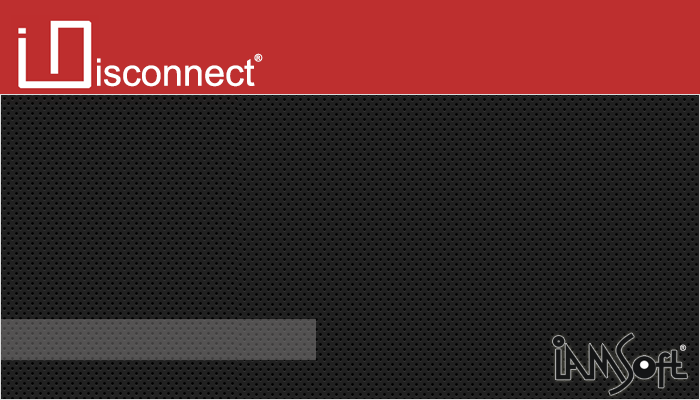
<style>
.page{position:relative;width:700px;height:400px;background:#202020}
.page>*{position:absolute;margin:0}
.t1{font:18px "ArialMT";color:#ffffff}
.t2{font:65px "ArialMT";color:#ffffff}
.t3{font:14px "ArialMT"}
</style>
<div class="page">
<p class="t1" style="left:254px;top:53px;width:9px;height:9px">®</p>
<p class="t2" style="left:97px;top:58px;width:158px;height:29px">isconnect</p>
<p class="t3" style="left:680px;top:344px;width:7px;height:7px">®</p>
</div>
